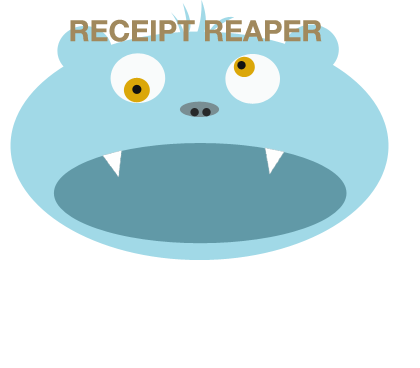
<style>
.page{position:relative;width:420px;height:368px;background:#ffffff}
.page>*{position:absolute;margin:0}
.t1{font:29.2px "HelveticaNeue-Bold";color:#a1895d}
</style>
<div class="page">
<p class="t1" style="left:70px;top:19px;width:252px;height:23px">RECEIPT REAPER</p>
</div>
